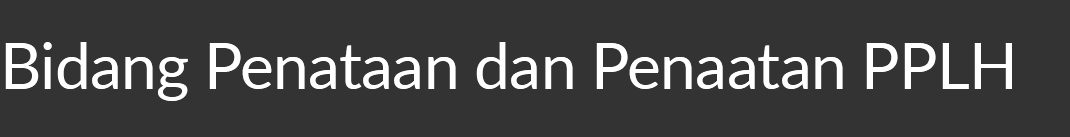
<style>
.page{position:relative;width:1070px;height:137px;background:#333333}
.page>*{position:absolute;margin:0}
.t1{font:64.2px "Lato-Regular";letter-spacing:-0.012em;color:#ffffff}
</style>
<div class="page">
<p class="t1" style="left:5px;top:42px;width:1007px;height:59px">Bidang Penataan dan Penaatan PPLH</p>
</div>
